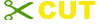
<style>
.page{position:relative;width:99px;height:24px;background:#ffffff}
.page>*{position:absolute;margin:0}
.t1{font:25.2px "Arial-Black";color:#f7e707}
</style>
<div class="page">
<p class="t1" style="left:38px;top:1px;width:58px;height:18px;opacity:0.97">CUT</p>
</div>
